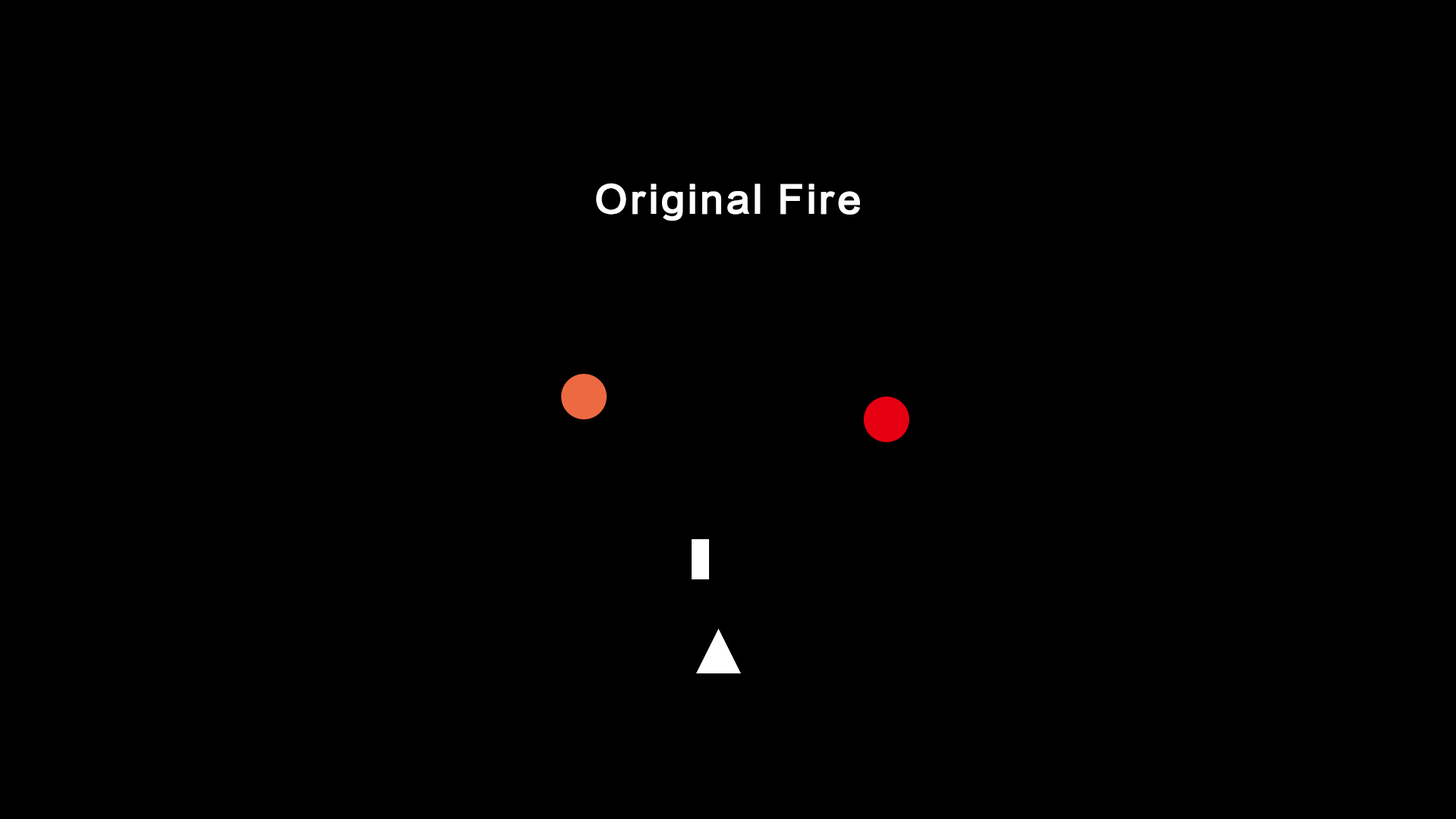
<style>
.page{position:relative;width:1456px;height:819px;background:#000000}
.page>*{position:absolute;margin:0}
.t1{font:36.4px "FZLTZHK--GBK1-0";letter-spacing:0.04em;color:#ffffff;font-weight:bold}
</style>
<div class="page">
<p class="t1" style="left:596px;top:183px;width:264px;height:38px">Original Fire</p>
</div>
